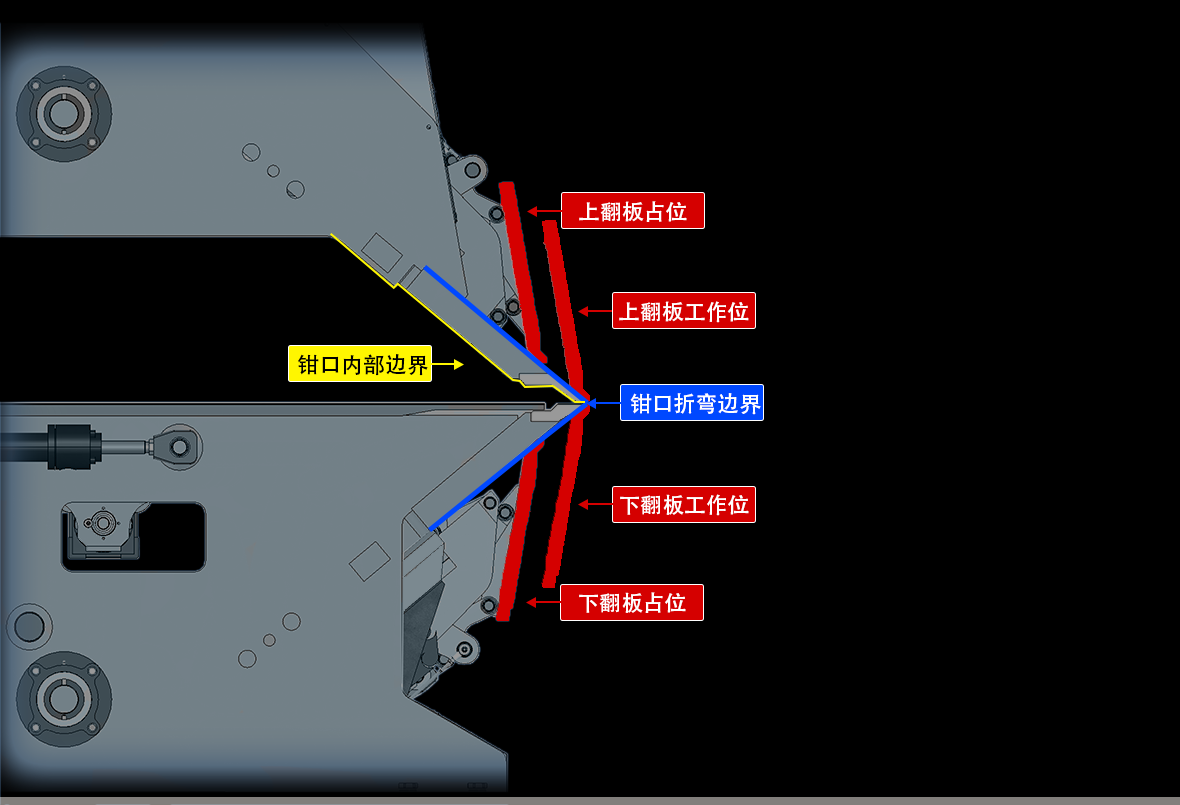
<style>
.page{position:relative;width:1180px;height:805px;background:#000000}
.page>*{position:absolute;margin:0}
.t1{font:21.9px "AdobeHeitiStd-Regular";color:#ffffff}
.t2{font:21.9px "AdobeHeitiStd-Regular";color:#000000}
.t3{font:21.6px "AdobeHeitiStd-Regular";color:#ffffff}
</style>
<div class="page">
<p class="t1" style="left:579px;top:201px;width:108px;height:21px">上翻板占位</p>
<p class="t1" style="left:619px;top:301px;width:130px;height:22px">上翻板工作位</p>
<p class="t2" style="left:298px;top:354px;width:130px;height:22px">钳口内部边界</p>
<p class="t1" style="left:630px;top:393px;width:131px;height:22px">钳口折弯边界</p>
<p class="t3" style="left:620px;top:494px;width:129px;height:22px">下翻板工作位</p>
<p class="t3" style="left:579px;top:592px;width:107px;height:21px">下翻板占位</p>
</div>
